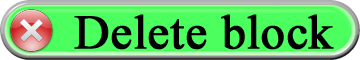
<style>
.page{position:relative;width:360px;height:60px;background:#4bff5f}
.page>*{position:absolute;margin:0}
.t1{font:48px "TimesNewRomanPSMT";color:#000000;font-weight:bold}
</style>
<div class="page">
<p class="t1" style="left:74px;top:14px;width:260px;height:36px">Delete block</p>
</div>
